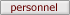
<style>
.page{position:relative;width:70px;height:15px;background:#e9e8e8}
.page>*{position:absolute;margin:0}
.t1{font:10px "Verdana";letter-spacing:-0.02em;color:#660000}
</style>
<div class="page">
<p class="t1" style="left:11px;top:3px;width:46px;height:10px">personnel</p>
</div>
